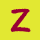
<style>
.page{position:relative;width:40px;height:40px;background:#e2e832}
.page>*{position:absolute;margin:0}
.t1{font:31.5px "AxureHandwriting-Bold";color:#980034;scale:0.95 1}
</style>
<div class="page">
<p class="t1" style="left:10px;top:8px;width:21px;height:25px">Z</p>
</div>
